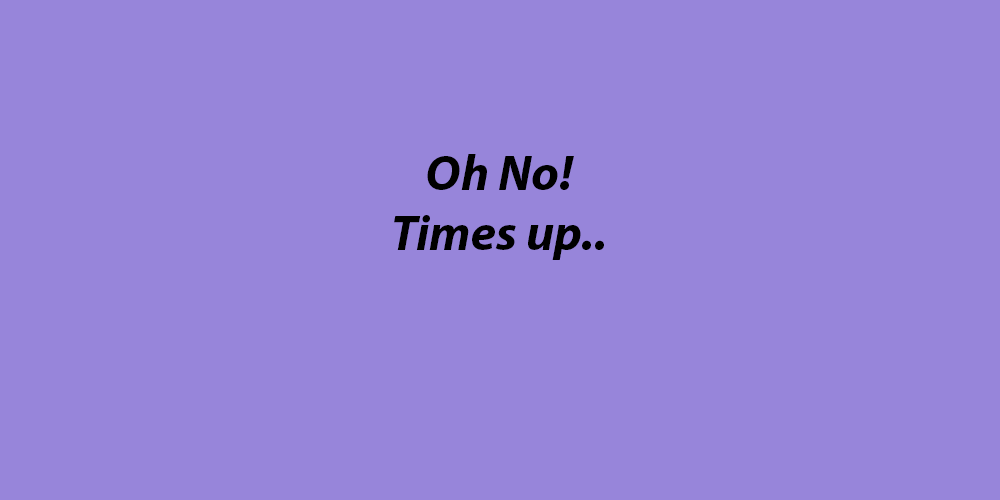
<style>
.page{position:relative;width:1000px;height:500px;background:#9785da}
.page>*{position:absolute;margin:0}
.t1{font:50px "MyriadPro-BoldIt";color:#000000}
</style>
<div class="page">
<p class="t1" style="left:394px;top:154px;width:210px;height:106px;text-align:center">Oh No!<br>Times up..</p>
</div>
